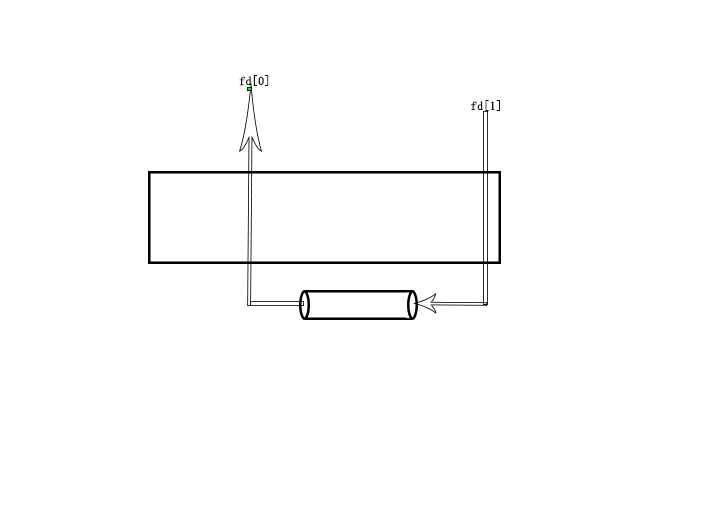
<style>
.page{position:relative;width:709px;height:510px;background:#ffffff}
.page>*{position:absolute;margin:0}
.t1{font:12px "FangSong";color:#111010;font-weight:bold}
</style>
<div class="page">
<p class="t1" style="left:239px;top:75px;width:30px;height:11px">fd[0]</p>
<p class="t1" style="left:471px;top:100px;width:29px;height:11px">fd[1]</p>
</div>
